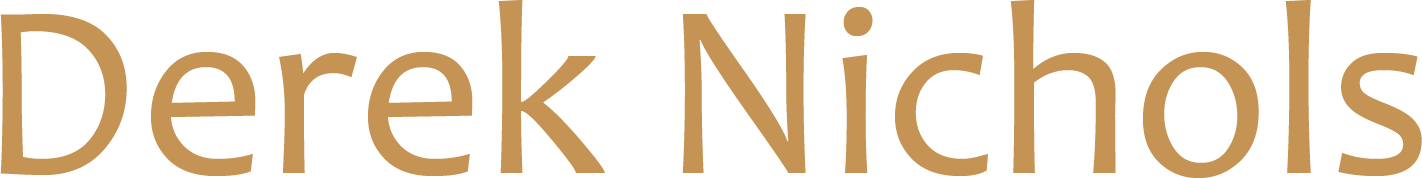
<style>
.page{position:relative;width:1422px;height:178px;background:#ffffff}
.page>*{position:absolute;margin:0}
.t1{font:250px "Candara";color:#c59353}
</style>
<div class="page">
<p class="t1" style="left:0px;top:0px;width:1422px;height:178px">Derek Nichols</p>
</div>
